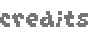
<style>
.page{position:relative;width:88px;height:36px;background:#ffffff}
.page>*{position:absolute;margin:0}
.t1{font:32px "GrapeSoda";color:#757575}
</style>
<div class="page">
<p class="t1" style="left:0px;top:11px;width:88px;height:16px">credits</p>
</div>
